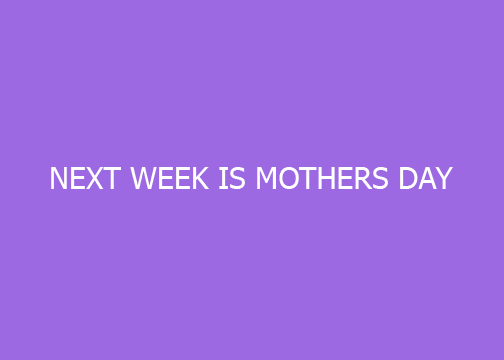
<style>
.page{position:relative;width:504px;height:360px;background:#9c69e2}
.page>*{position:absolute;margin:0}
.t1{font:30px "Tahoma";color:#ffffff}
</style>
<div class="page">
<p class="t1" style="left:51px;top:167px;width:402px;height:22px">NEXT WEEK IS MOTHERS DAY</p>
</div>
